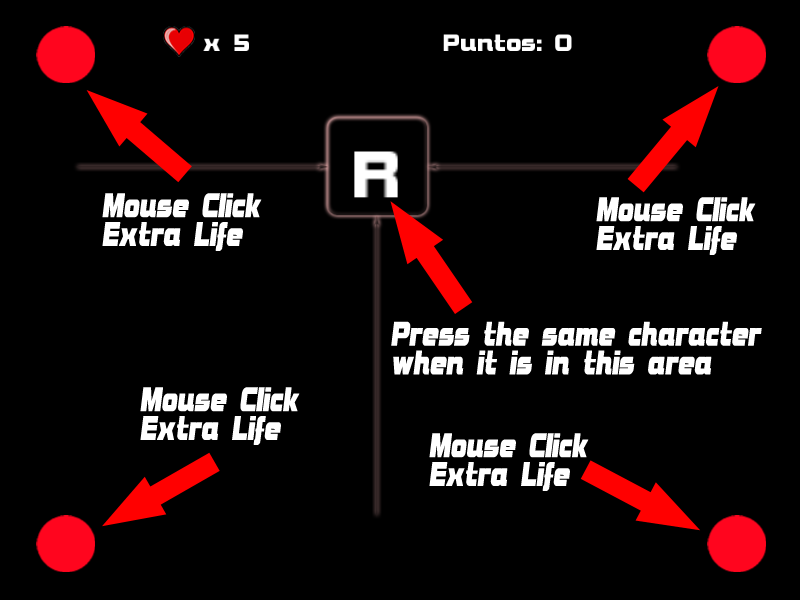
<style>
.page{position:relative;width:800px;height:600px;background:#000000}
.page>*{position:absolute;margin:0}
.t1{font:36px "BolsterBold";letter-spacing:-0.005em;color:#ffffff;font-weight:bold;font-style:italic;scale:0.69 1}
</style>
<div class="page">
<p class="t1" style="left:102px;top:193px;width:160px;height:58px">Mouse Click<br>Extra Life</p>
<p class="t1" style="left:596px;top:197px;width:160px;height:58px">Mouse Click<br>Extra Life</p>
<p class="t1" style="left:391px;top:321px;width:371px;height:54px">Press the same character <br>when it is in this area</p>
<p class="t1" style="left:140px;top:387px;width:160px;height:58px">Mouse Click<br>Extra Life</p>
<p class="t1" style="left:429px;top:433px;width:160px;height:58px">Mouse Click<br>Extra Life</p>
</div>
